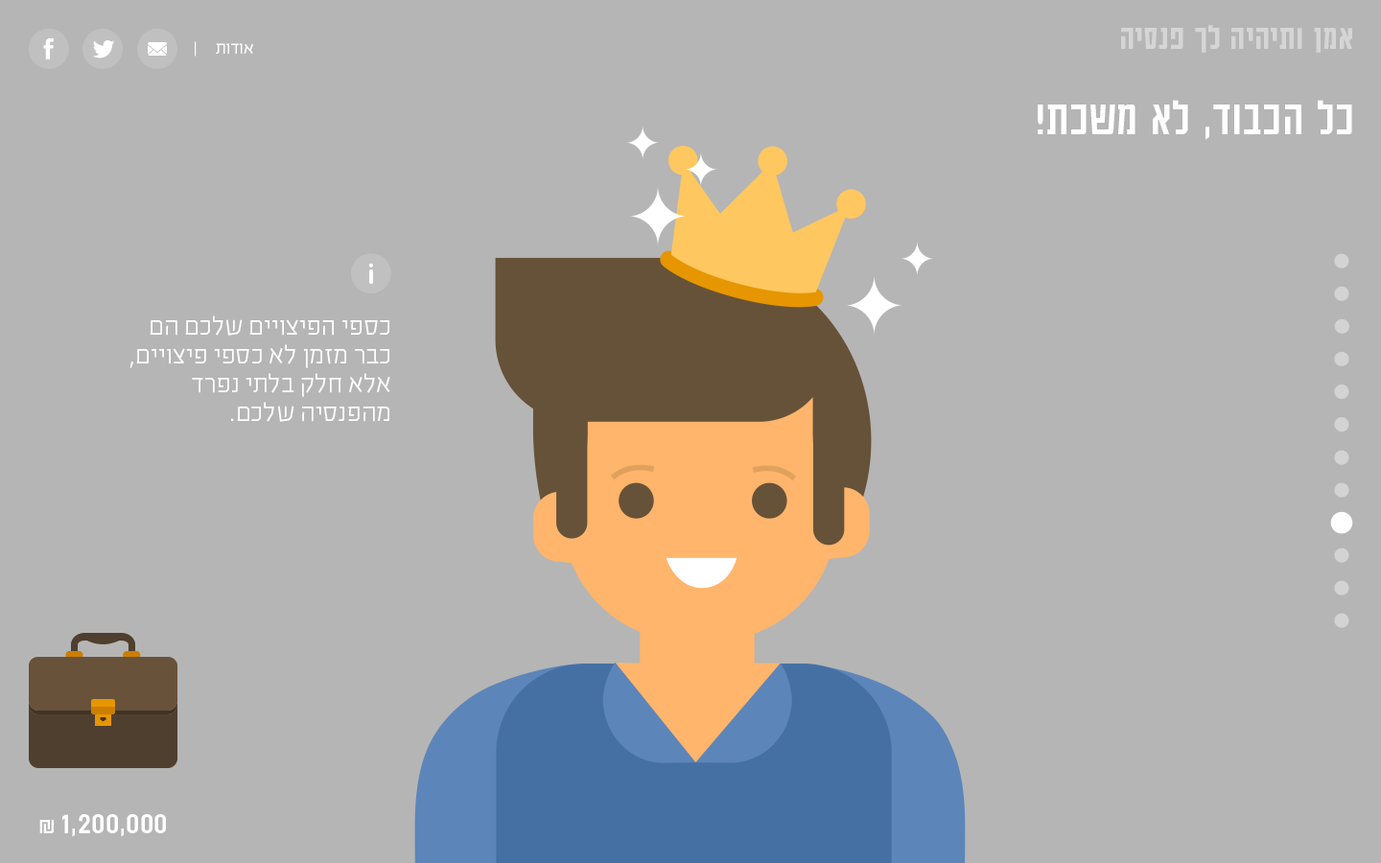
<style>
.page{position:relative;width:1381px;height:863px;background:#b5b5b5}
.page>*{position:absolute;margin:0}
.t1{font:37.8px "AdumaFOT-Medium";color:#d5d5d5}
.t2{font:19.2px "EzerBlock_OE-Light";color:#ffffff}
.t3{font:53.8px "AdumaFOT-Regular";color:#ffffff}
.t4{font:28.8px/28.8px "EzerBlock_OE-Light";color:#ffffff}
.t5{font:33.6px "AdumaFOT-Regular";color:#ffffff}
.t6{font:24px "AdumaFOT-Regular";color:#ffffff}
</style>
<div class="page">
<p class="t1" style="left:1121px;top:25px;width:231px;height:28px">אמן ותיהיה לך פנסיה</p>
<p class="t2" style="left:195px;top:41px;width:58px;height:16px">אודות     |</p>
<p class="t3" style="left:1038px;top:100px;width:314px;height:40px">כל הכבוד, לא משכת!</p>
<p class="t4" style="left:129px;top:316px;width:261px;height:106px">כספי הפיצויים שלכם הם <br>כבר מזמן לא כספי פיצויים, אלא חלק בלתי נפרד מהפנסיה שלכם.</p>
<p class="t5" style="left:39px;top:814px;width:127px;height:23px">1,200,000<span class="t6"> ₪</span></p>
</div>
